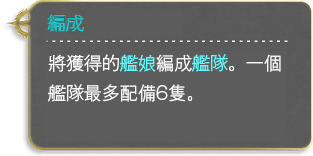
<style>
.page{position:relative;width:313px;height:156px;background:#5c5c5c}
.page>*{position:absolute;margin:0}
.t1{font:18px/30px "GothicMB101Pr6N-Light";color:#fbfaf9}
.t2{font:18px/30px "GothicMB101Pr6N-Light";color:#64fbff}
</style>
<div class="page">
<p class="t1" style="left:48px;top:54px;width:233px;height:48px">將獲得的<span class="t2">艦娘</span>編成<span class="t2">艦隊</span>。一個<br>艦隊最多配備6隻。</p>
</div>
